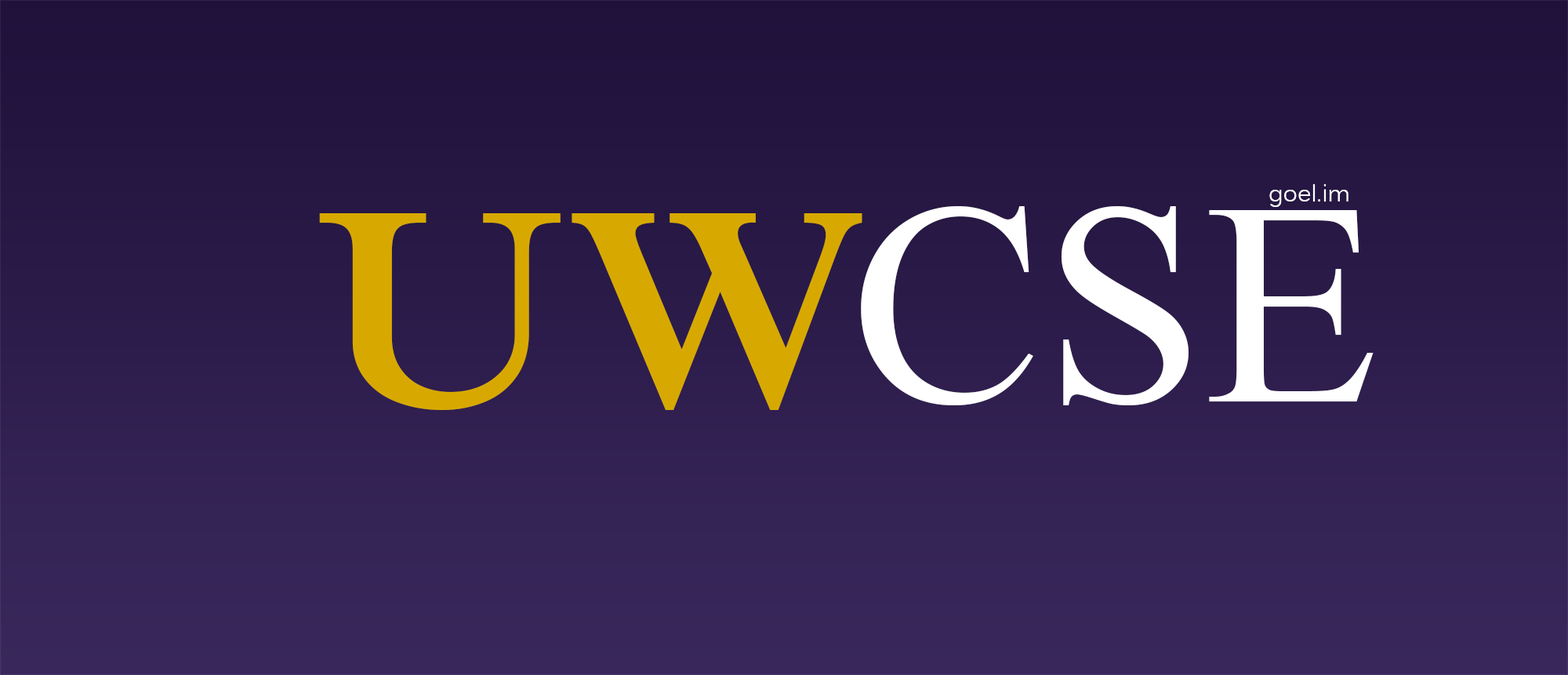
<style>
.page{position:relative;width:1568px;height:675px}
.page>*{position:absolute;margin:0}
.t1{font:23.5px "Kalinga";color:#ffffff}
.t2{font:288.5px "IskoolaPota";color:#ffffff}
.t3{font:288.5px "IskoolaPota-Bold";color:#d7a900}
</style>
<div class="page">
<p class="t1" style="left:1269px;top:183px;width:79px;height:24px">goel.im</p>
<p class="t2" style="left:861px;top:206px;width:513px;height:199px">CSE</p>
<p class="t3" style="left:319px;top:213px;width:543px;height:197px">UW</p>
</div>
